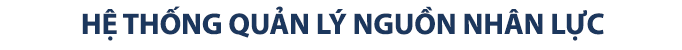
<style>
.page{position:relative;width:682px;height:50px;background:#ffffff}
.page>*{position:absolute;margin:0}
.t1{font:30px "MyriadPro-Bold";color:#1c375d}
</style>
<div class="page">
<p class="t1" style="left:82px;top:6px;width:522px;height:35px">HỆ THỐNG QUẢN LÝ NGUỒN NHÂN LỰC</p>
</div>
